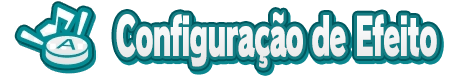
<style>
.page{position:relative;width:458px;height:76px;background:#ffffff}
.page>*{position:absolute;margin:0}
.t1{font:52px "RodinPro-UB";letter-spacing:-0.041em;color:#f2f3f3;scale:0.53 1}
</style>
<div class="page">
<p class="t1" style="left:116px;top:12px;width:321px;height:56px">Configuração de Efeito</p>
</div>
